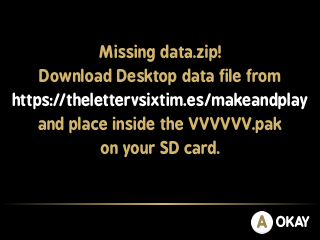
<style>
.page{position:relative;width:320px;height:240px;background:#000000}
.page>*{position:absolute;margin:0}
.t1{font:16px/24px "BPreplay-Bold";color:#d2b46c}
.t2{font:16px/24px "BPreplay-Bold";color:#ffffff}
.t3{font:16px "BPreplay-Bold";color:#9f8952}
.t4{font:14px "BPreplay-Bold";color:#ffffff}
</style>
<div class="page">
<p class="t1" style="left:12px;top:44px;width:296px;height:114px;text-align:center">Missing data.zip!<br>Download Desktop data file from<br><span class="t2">https://thelettervsixtim.es/makeandplay<br></span>and place inside the VVVVVV.pak<br>on your SD card.</p>
<p class="t3" style="left:257px;top:215px;width:10px;height:13px">A</p>
<p class="t4" style="left:276px;top:215px;width:34px;height:13px">OKAY</p>
</div>
